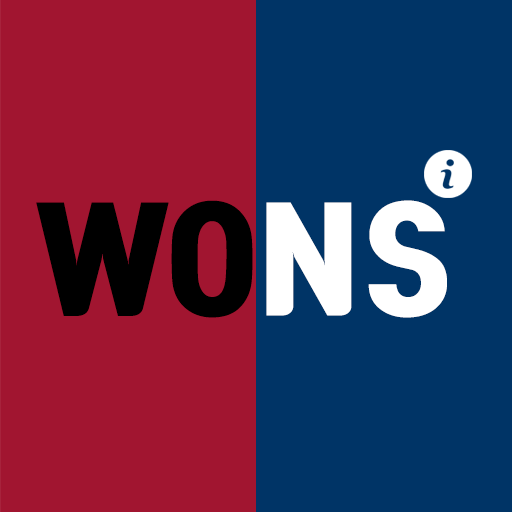
<style>
.page{position:relative;width:512px;height:512px;background:#003466}
.page>*{position:absolute;margin:0}
.t1{font:130px "TmonMonsoriBlack";color:#000000;text-transform:uppercase}
.t2{font:130px "TmonMonsoriBlack";letter-spacing:0.05em;color:#ffffff;text-transform:uppercase}
</style>
<div class="page">
<p class="t1" style="left:36px;top:200px;width:411px;height:118px">wo<span class="t2">ns</span></p>
</div>
